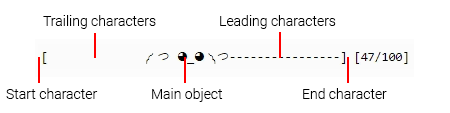
<style>
.page{position:relative;width:450px;height:113px;background:#ffffff}
.page>*{position:absolute;margin:0}
.t1{font:14px "Roboto-Light";color:#000000}
</style>
<div class="page">
<p class="t1" style="left:43px;top:15px;width:113px;height:14px">Trailing characters</p>
<p class="t1" style="left:220px;top:15px;width:116px;height:14px">Leading characters</p>
<p class="t1" style="left:6px;top:88px;width:92px;height:11px">Start character</p>
<p class="t1" style="left:152px;top:88px;width:71px;height:14px">Main object</p>
<p class="t1" style="left:303px;top:88px;width:84px;height:11px">End character</p>
</div>
